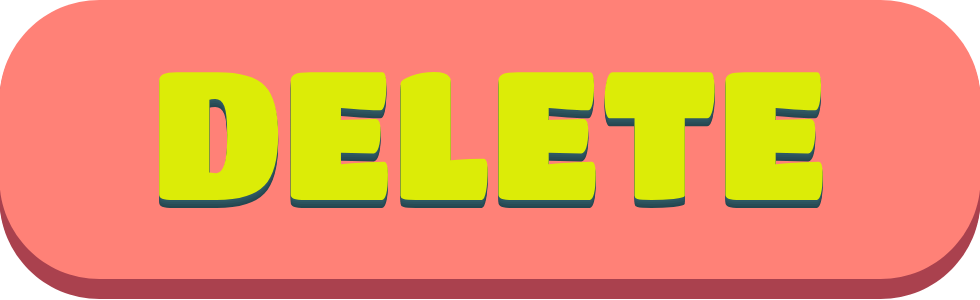
<style>
.page{position:relative;width:980px;height:300px;background:#ff8177}
.page>*{position:absolute;margin:0}
.t1{font:180px "TitanOne";color:#dcec07}
</style>
<div class="page">
<p class="t1" style="left:159px;top:72px;width:664px;height:128px">DELETE</p>
</div>
